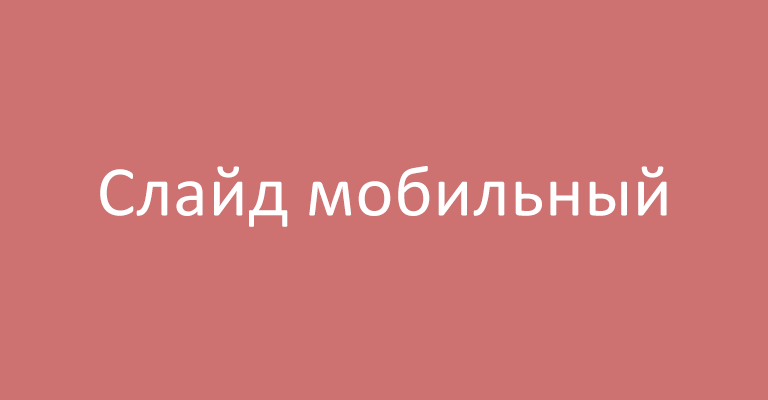
<style>
.page{position:relative;width:768px;height:400px;background:#cd7171}
.page>*{position:absolute;margin:0}
.t1{font:72px "Calibri";letter-spacing:0.01em;color:#ffffff}
</style>
<div class="page">
<p class="t1" style="left:100px;top:166px;width:567px;height:61px">Слайд мобильный</p>
</div>
